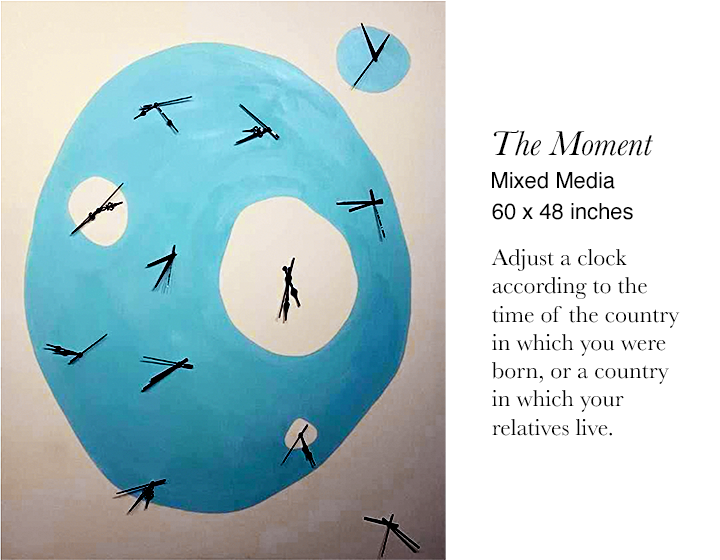
<style>
.page{position:relative;width:720px;height:560px;background:#ffffff}
.page>*{position:absolute;margin:0}
.t1{font:22px/11.5px "Helvetica";color:#000000}
.t2{font:36px/32.8px "Baskerville-Italic";color:#000000}
.t3{font:22px/30.5px "Helvetica";color:#000000}
.t4{font:24px/28.2px "Baskerville";color:#000000}
</style>
<div class="page">
<p class="t1" style="left:492px;top:130px;width:161px;height:90px"><span class="t2">The Moment<br> </span><span class="t3">Mixed Media<br> </span>60 x 48 inches</p>
<p class="t4" style="left:491px;top:249px;width:189px;height:187px">Adjust a clock according to the time of the country<br>in which you were born, or a country in which your relatives live.</p>
</div>
